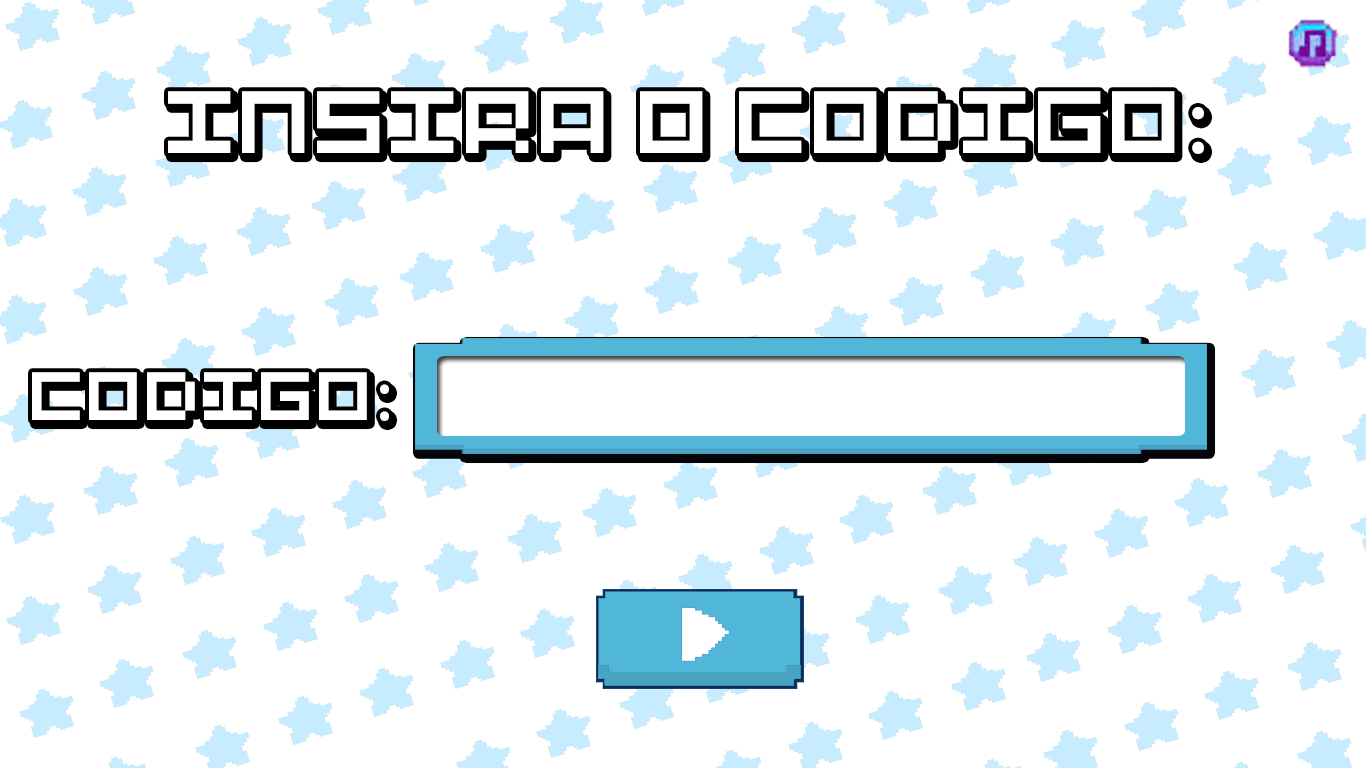
<style>
.page{position:relative;width:1366px;height:768px;background:#ffffff}
.page>*{position:absolute;margin:0}
.t1{font:98.7px "Pixel-Art";color:#ffffff}
.t2{font:98.7px "MyriadPro-Regular";color:#ffffff}
.t3{font:76.4px "Pixel-Art";color:#ffffff}
.t4{font:76.4px "MyriadPro-Regular";color:#ffffff}
</style>
<div class="page">
<p class="t1" style="left:168px;top:91px;width:1036px;height:63px"><span class="t2">:</span>insira o codigo</p>
<p class="t3" style="left:32px;top:372px;width:357px;height:49px"><span class="t4">:</span>codigo</p>
</div>
